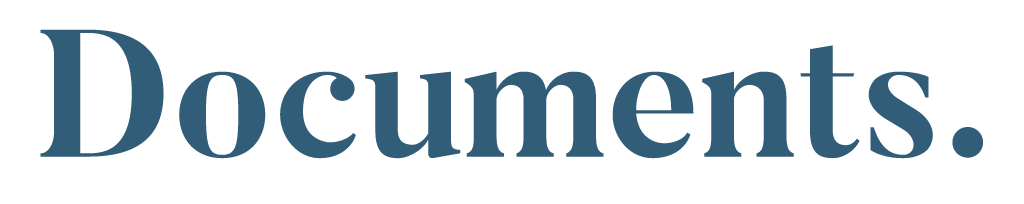
<style>
.page{position:relative;width:1024px;height:204px;background:#ffffff}
.page>*{position:absolute;margin:0}
.t1{font:180px "Butler-Bold";color:#325d79}
</style>
<div class="page">
<p class="t1" style="left:40px;top:29px;width:943px;height:130px">Documents.</p>
</div>
